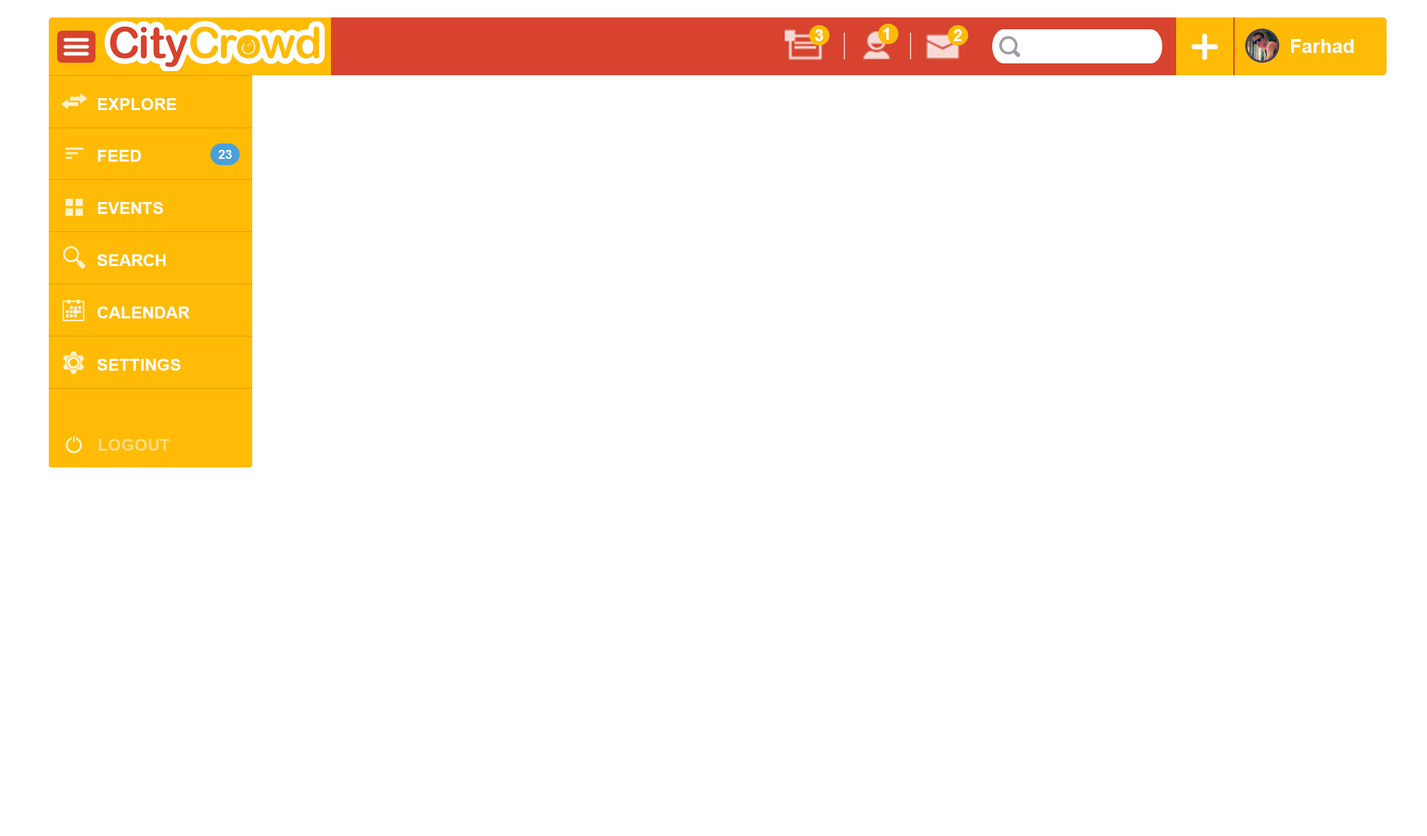
<style>
.page{position:relative;width:1427px;height:836px;background:#ffffff}
.page>*{position:absolute;margin:0}
.t1{font:16.7px "Arial-BoldMT";color:#ffffff}
.t2{font:19.5px "Arial-BoldMT";color:#ffffff}
.t3{font:16.7px/52.2px "Arial-BoldMT";color:#ffffff}
.t4{font:12.4px "Arial-BoldMT";color:#ffffff}
.t5{font:16.7px "Arial-BoldMT";color:#fdda7d}
</style>
<div class="page">
<p class="t1" style="left:814px;top:29px;width:9px;height:12px">3</p>
<p class="t1" style="left:883px;top:28px;width:6px;height:12px">1</p>
<p class="t1" style="left:953px;top:29px;width:9px;height:12px">2</p>
<p class="t2" style="left:1291px;top:39px;width:62px;height:14px">Farhad</p>
<p class="t3" style="left:97px;top:98px;width:92px;height:273px">EXPLORE<br>FEED<br>EVENTS<br>SEARCH<br>CALENDAR<br>SETTINGS</p>
<p class="t4" style="left:218px;top:150px;width:14px;height:9px">23</p>
<p class="t5" style="left:98px;top:439px;width:72px;height:12px">LOGOUT</p>
</div>
